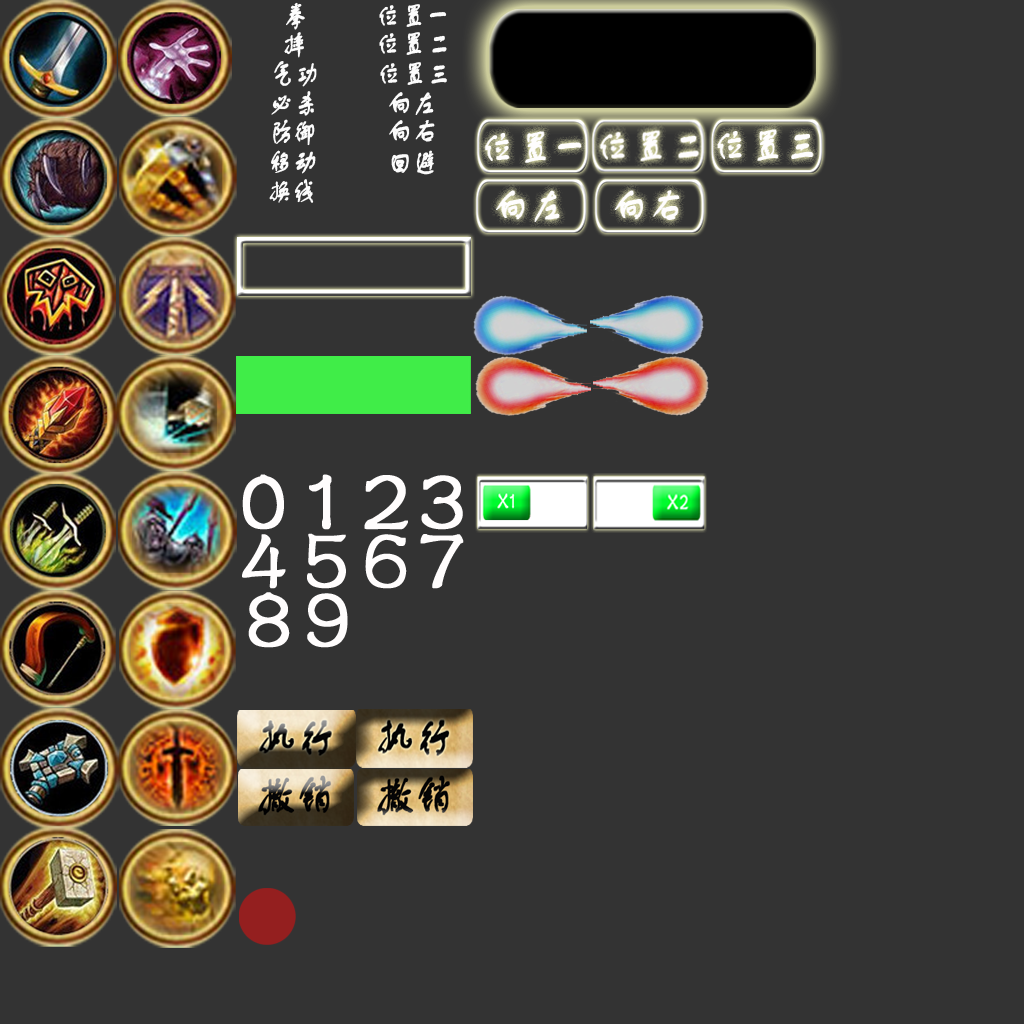
<style>
.page{position:relative;width:1024px;height:1024px;background:#333333}
.page>*{position:absolute;margin:0}
.t1{font:28.9px "FZSTK--GBK1-0";letter-spacing:0.05em;color:#fcfcfc;font-weight:bold;scale:0.81 1}
.t2{font:96.9px "FZSTK--GBK1-0";letter-spacing:0.05em;color:#fffdfd;font-weight:bold;scale:0.94 1}
</style>
<div class="page">
<p class="t1" style="left:286px;top:2px;width:19px;height:28px">拳</p>
<p class="t1" style="left:379px;top:4px;width:68px;height:23px">位置一</p>
<p class="t1" style="left:284px;top:32px;width:20px;height:26px">摔</p>
<p class="t1" style="left:379px;top:32px;width:68px;height:23px">位置二</p>
<p class="t1" style="left:274px;top:61px;width:43px;height:26px">气功</p>
<p class="t1" style="left:380px;top:62px;width:67px;height:23px">位置三</p>
<p class="t1" style="left:271px;top:91px;width:43px;height:25px">必杀</p>
<p class="t1" style="left:389px;top:92px;width:45px;height:23px">向左</p>
<p class="t1" style="left:273px;top:119px;width:42px;height:27px">防御</p>
<p class="t1" style="left:389px;top:120px;width:46px;height:22px">向右</p>
<p class="t1" style="left:271px;top:150px;width:45px;height:24px">移动</p>
<p class="t1" style="left:391px;top:150px;width:43px;height:25px">回避</p>
<p class="t1" style="left:269px;top:179px;width:45px;height:24px">换线</p>
<p class="t2" style="left:242px;top:474px;width:42px;height:56px">0</p>
<p class="t2" style="left:309px;top:474px;width:23px;height:56px">1</p>
<p class="t2" style="left:364px;top:475px;width:44px;height:55px">2</p>
<p class="t2" style="left:421px;top:475px;width:42px;height:55px">3</p>
<p class="t2" style="left:242px;top:534px;width:44px;height:55px">4</p>
<p class="t2" style="left:307px;top:533px;width:39px;height:56px">5</p>
<p class="t2" style="left:365px;top:534px;width:42px;height:55px">6</p>
<p class="t2" style="left:420px;top:534px;width:44px;height:55px">7</p>
<p class="t2" style="left:248px;top:592px;width:42px;height:56px">8</p>
<p class="t2" style="left:307px;top:593px;width:41px;height:55px">9</p>
</div>
